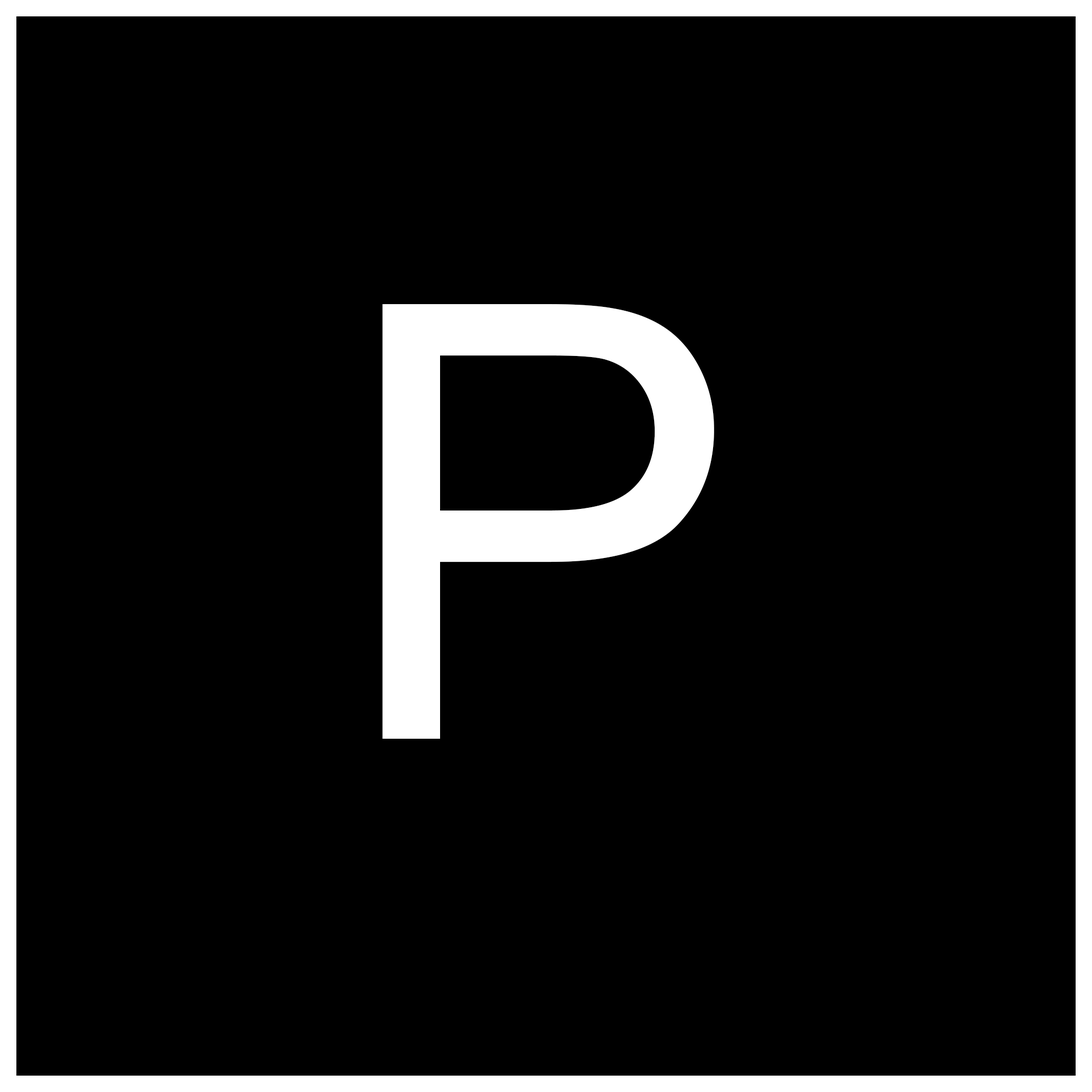
<style>
.page{position:relative;width:1092px;height:1092px;background:#000000}
.page>*{position:absolute;margin:0}
.t1{font:606.7px "ArialMT";color:#ffffff}
</style>
<div class="page">
<p class="t1" style="left:382px;top:304px;width:332px;height:435px">P</p>
</div>
